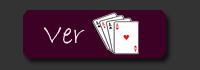
<style>
.page{position:relative;width:200px;height:70px;background:#333333}
.page>*{position:absolute;margin:0}
.t1{font:30px "BradleyHandITC";color:#f9efee}
</style>
<div class="page">
<p class="t1" style="left:44px;top:27px;width:41px;height:17px">Ver</p>
</div>
